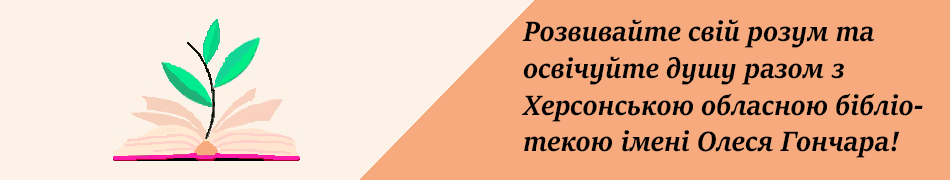
<style>
.page{position:relative;width:950px;height:180px;background:#f6aa7d}
.page>*{position:absolute;margin:0}
.t1{font:30.5px "SitkaSubheading-BoldItalic";color:#000000;scale:0.91 1}
</style>
<div class="page">
<p class="t1" style="left:521px;top:19px;width:402px;height:139px">Розвивайте свій розум та <br>освічуйте душу разом з <br>Херсонською обласною бібліотекою імені Олеся Гончара!</p>
</div>
